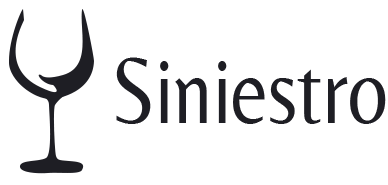
<style>
.page{position:relative;width:388px;height:185px;background:#ffffff}
.page>*{position:absolute;margin:0}
.t1{font:96px "Belleza-Regular";color:#1e1e24;scale:0.82 1}
</style>
<div class="page">
<p class="t1" style="left:116px;top:57px;width:270px;height:67px">Siniestro</p>
</div>
